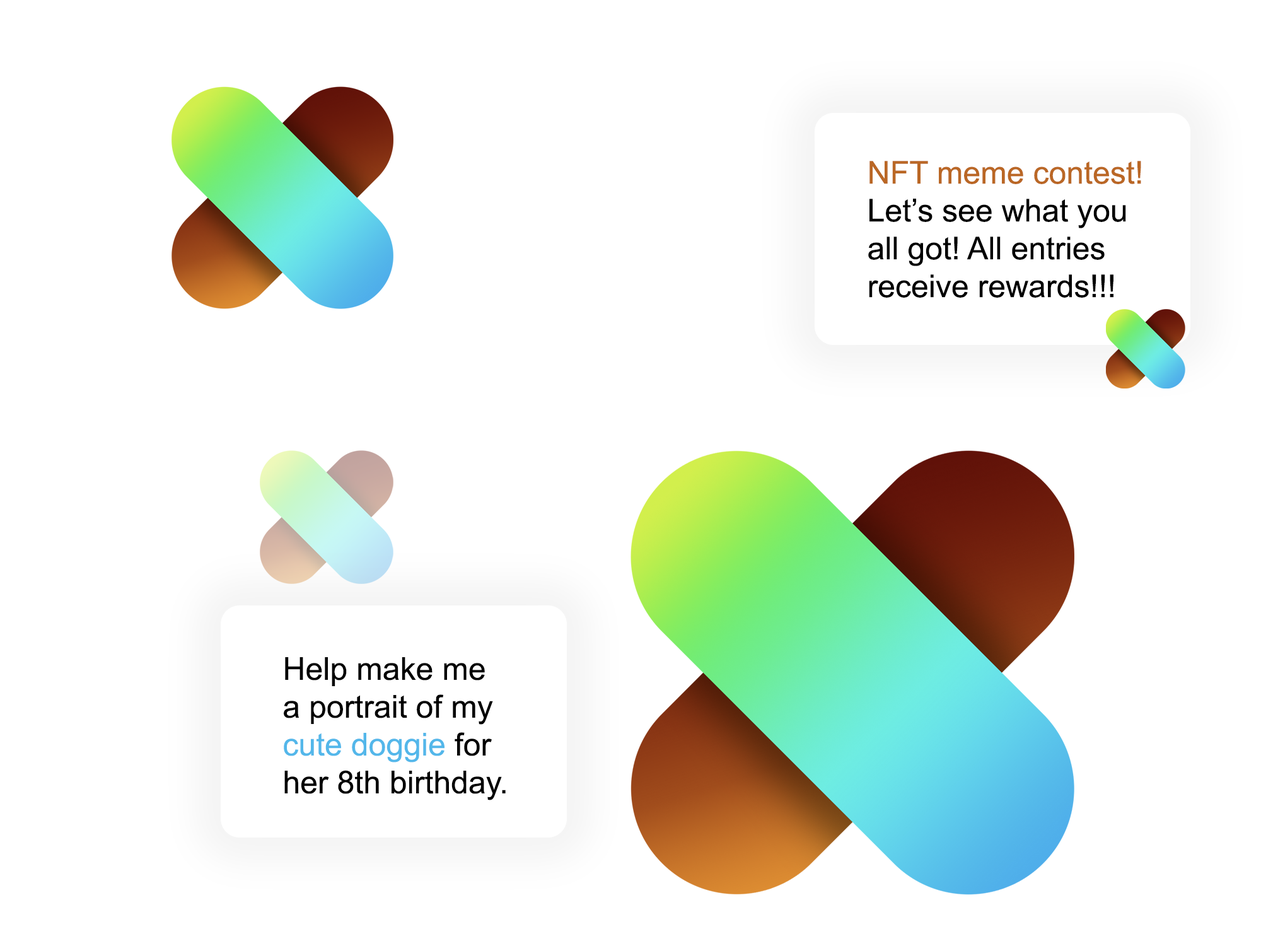
<style>
.page{position:relative;width:1261px;height:946px;background:#ffffff}
.page>*{position:absolute;margin:0}
.t1{font:31.5px "ArialMT";color:#000000}
.t2{font:31.5px "ArialMT";color:#ba6725}
.t3{font:31.5px "ArialMT";color:#53b7ea}
</style>
<div class="page">
<p class="t1" style="left:868px;top:161px;width:273px;height:137px"><span class="t2">NFT meme contest!<br></span>Let’s see what you<br>all got! All entries<br>receive rewards!!!</p>
<p class="t1" style="left:284px;top:657px;width:222px;height:143px">Help make me<br>a portrait of my <br><span class="t3">cute doggie</span> for <br>her 8th birthday.</p>
</div>
